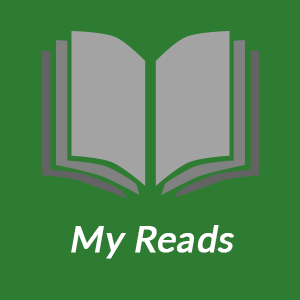
<style>
.page{position:relative;width:300px;height:300px;background:#2e7c31}
.page>*{position:absolute;margin:0}
.t1{font:36px "Lato-Regular";letter-spacing:0.01em;color:#ffffff;font-weight:bold;font-style:italic}
</style>
<div class="page">
<p class="t1" style="left:71px;top:225px;width:163px;height:34px">My Reads</p>
</div>
